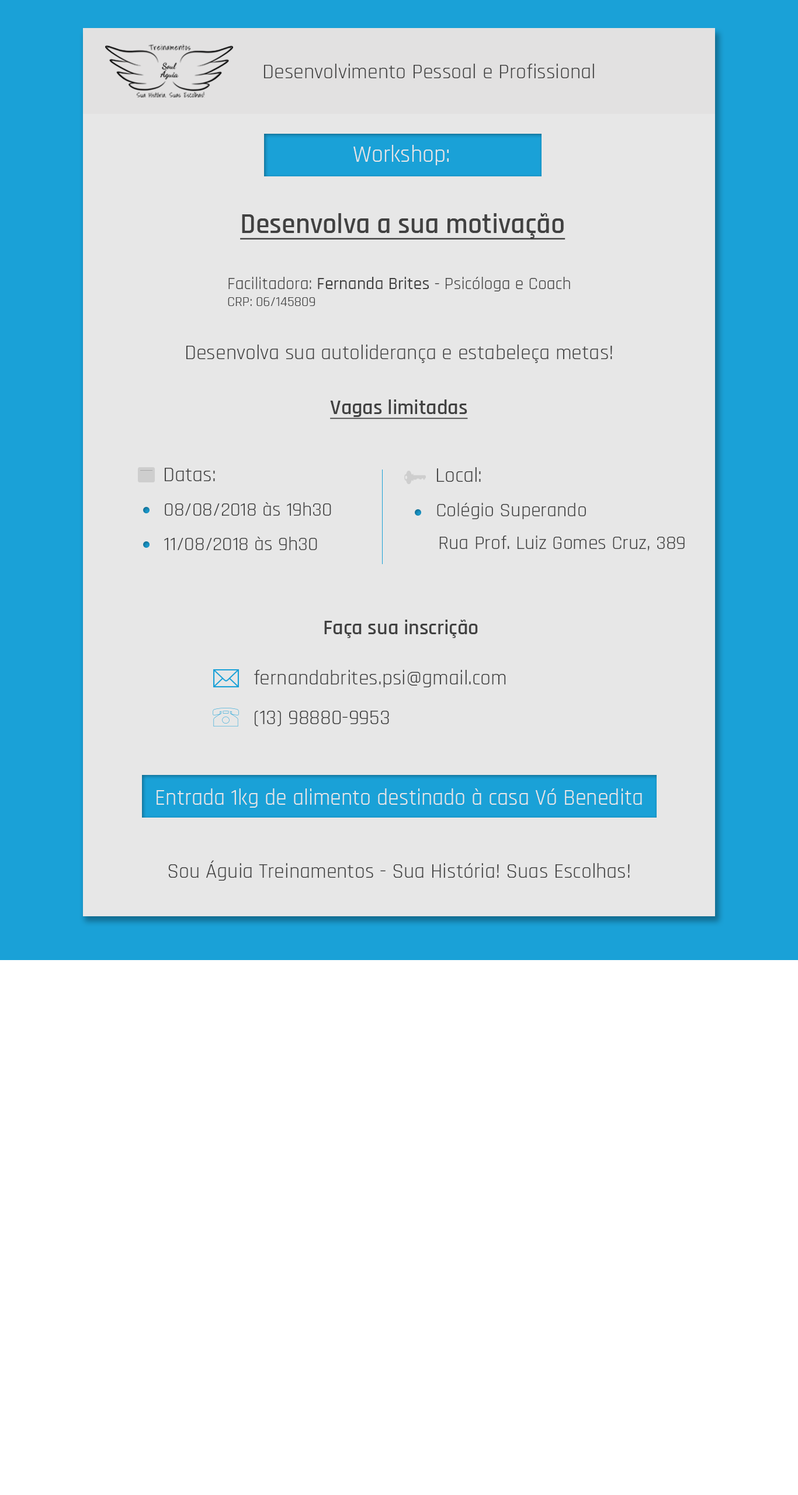
<style>
.page{position:relative;width:798px;height:1495px;background:#ffffff}
.page>*{position:absolute;margin:0}
.t1{font:21px "Rajdhani-Regular";color:#414141}
.t2{font:23.4px "Rajdhani-Regular";color:#e7e7e7}
.t3{font:28px "Rajdhani-SemiBold";color:#414141;text-decoration:underline}
.t4{font:17.5px "Rajdhani-Regular";color:#414141}
.t5{font:17.5px "Rajdhani-Medium";color:#414141}
.t6{font:14px "Rajdhani-Regular";color:#414141}
.t7{font:21px "Rajdhani-SemiBold";color:#414141;text-decoration:underline}
.t8{font:19.9px "Rajdhani-Regular";color:#414141}
.t9{font:21px "Rajdhani-SemiBold";color:#414141}
.t10{font:22.2px "Rajdhani-Regular";color:#e7e7e7}
</style>
<div class="page">
<p class="t1" style="left:263px;top:64px;width:331px;height:14px">Desenvolvimento Pessoal e Profissional</p>
<p class="t2" style="left:353px;top:145px;width:95px;height:20px">Workshop:</p>
<p class="t3" style="left:240px;top:213px;width:325px;height:27px">Desenvolva a sua motivação</p>
<p class="t4" style="left:228px;top:277px;width:342px;height:29px">Facilitadora: <span class="t5">Fernanda Brites</span> - Psicóloga e Coach<br><span class="t6">CRP: 06/145809</span></p>
<p class="t1" style="left:186px;top:345px;width:426px;height:18px">Desenvolva sua autoliderança e estabeleça metas!</p>
<p class="t7" style="left:330px;top:399px;width:138px;height:20px">Vagas limitadas</p>
<p class="t1" style="left:164px;top:468px;width:51px;height:13px">Datas:</p>
<p class="t1" style="left:436px;top:467px;width:45px;height:15px">Local:</p>
<p class="t8" style="left:165px;top:502px;width:166px;height:14px">08/08/2018 às 19h30</p>
<p class="t8" style="left:437px;top:503px;width:149px;height:16px">Colégio Superando</p>
<p class="t8" style="left:164px;top:537px;width:153px;height:13px">11/08/2018 às 9h30</p>
<p class="t8" style="left:439px;top:535px;width:245px;height:16px">Rua Prof. Luiz Gomes Cruz, 389</p>
<p class="t9" style="left:324px;top:620px;width:154px;height:18px">Faça sua inscrição</p>
<p class="t1" style="left:254px;top:670px;width:252px;height:17px">fernandabrites.psi@gmail.com</p>
<p class="t1" style="left:254px;top:711px;width:135px;height:15px">(13) 98880-9953</p>
<p class="t10" style="left:156px;top:788px;width:486px;height:20px">Entrada 1kg de alimento destinado à casa Vó Benedita</p>
<p class="t1" style="left:168px;top:860px;width:461px;height:21px">Sou Águia Treinamentos - Sua História! Suas Escolhas!</p>
</div>
